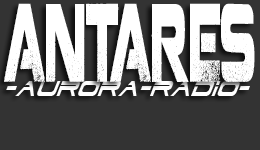
<style>
.page{position:relative;width:260px;height:150px;background:#333333}
.page>*{position:absolute;margin:0}
.t1{font:109.5px "Coalition";color:#ffffff;scale:0.35 1}
.t2{font:25.9px "DodgerCondensedItalic";color:#ffffff;scale:0.94 1}
</style>
<div class="page">
<p class="t1" style="left:4px;top:3px;width:251px;height:79px">ANTARES</p>
<p class="t2" style="left:6px;top:81px;width:244px;height:15px">-aurora-radio-</p>
</div>
